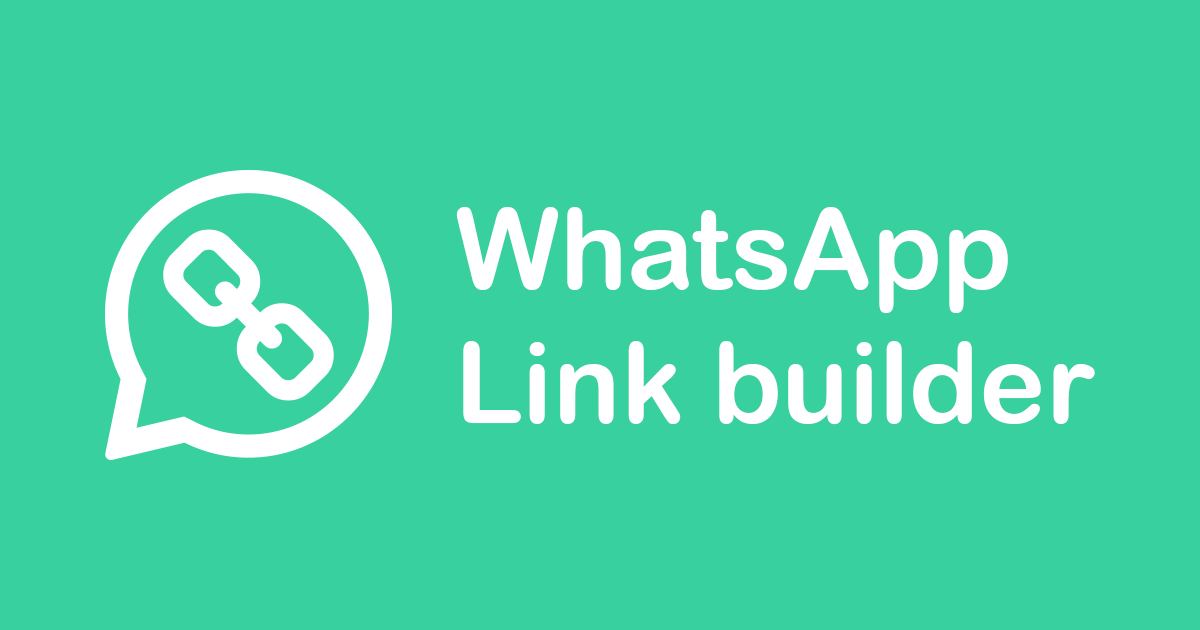
<style>
.page{position:relative;width:1200px;height:630px;background:#38d09e}
.page>*{position:absolute;margin:0}
.t1{font:112px "ArialRoundedMTBold";color:#ffffff}
</style>
<div class="page">
<p class="t1" style="left:456px;top:207px;width:639px;height:218px">WhatsApp <br>Link builder</p>
</div>
